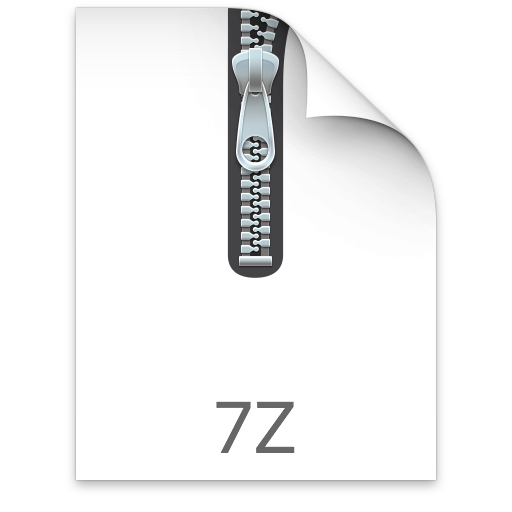
<style>
.page{position:relative;width:512px;height:512px;background:#ffffff}
.page>*{position:absolute;margin:0}
.t1{font:72px "SFProDisplay-Regular";color:#676767}
</style>
<div class="page">
<p class="t1" style="left:216px;top:401px;width:79px;height:52px">7Z</p>
</div>
